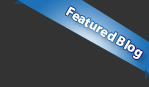
<style>
.page{position:relative;width:149px;height:87px;background:#333333}
.page>*{position:absolute;margin:0}
.t1{font:13.8px "MyriadPro-Bold";color:#ffffff}
</style>
<div class="page">
<p class="t1" style="left:65px;top:6px;width:78px;height:53px;rotate:30deg">Featured Blog</p>
</div>
